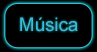
<style>
.page{position:relative;width:97px;height:52px;background:#000000}
.page>*{position:absolute;margin:0}
.t1{font:18.7px "ArialMT";color:#39bcd8}
</style>
<div class="page">
<p class="t1" style="left:20px;top:17px;width:58px;height:15px">Música</p>
</div>
